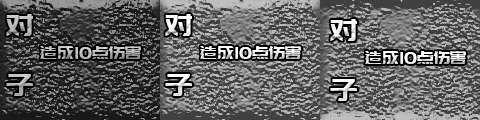
<style>
.page{position:relative;width:480px;height:120px}
.page>*{position:absolute;margin:0}
.t1{font:30px/60px "PangMenZhengDao";letter-spacing:-0.01em;color:#bdbdbd}
.t2{font:30px/60px "PangMenZhengDao";letter-spacing:-0.01em;color:#ffffff}
.t3{font:18px "PangMenZhengDao";letter-spacing:-0.01em}
.t4{font:18px "PangMenZhengDao";letter-spacing:-0.01em;color:#ffffff}
</style>
<div class="page">
<p class="t1" style="left:6px;top:14px;width:27px;height:82px">对<br>子</p>
<p class="t2" style="left:165px;top:14px;width:27px;height:82px">对<br>子</p>
<p class="t2" style="left:330px;top:19px;width:27px;height:82px">对<br>子</p>
<p class="t3" style="left:40px;top:46px;width:101px;height:13px">造成10点伤害</p>
<p class="t4" style="left:200px;top:46px;width:101px;height:13px">造成10点伤害</p>
<p class="t4" style="left:365px;top:51px;width:101px;height:13px">造成10点伤害</p>
</div>
